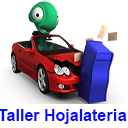
<style>
.page{position:relative;width:128px;height:128px;background:#ffffff}
.page>*{position:absolute;margin:0}
.t1{font:16px "Arial-BoldMT";color:#070cf5}
.t2{font:17px "Arial-BoldMT";color:#070cf5}
</style>
<div class="page">
<p class="t1" style="left:0px;top:109px;width:127px;height:15px">Taller Hojalate<span class="t2">ria</span></p>
</div>
